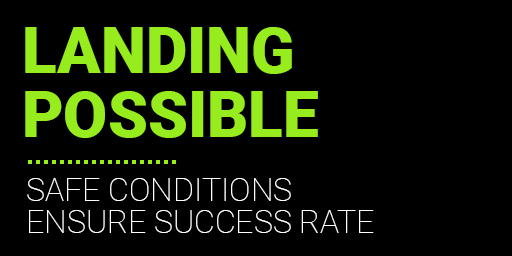
<style>
.page{position:relative;width:512px;height:256px;background:#000000}
.page>*{position:absolute;margin:0}
.t1{font:64px/32px "Roboto-Black";color:#97ec1d;text-transform:uppercase}
.t2{font:32px/32px "Roboto-Thin";color:#ffffff;text-transform:uppercase}
</style>
<div class="page">
<p class="t1" style="left:25px;top:27px;width:293px;height:111px">LANDING<br><br>POSSIBLE</p>
<p class="t2" style="left:27px;top:178px;width:347px;height:55px">SAFE CONDITIONS<br>ENSURE SUCCESS RATE</p>
</div>
